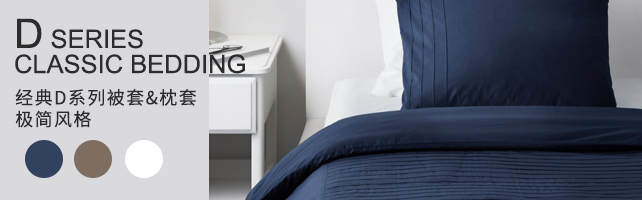
<style>
.page{position:relative;width:642px;height:200px;background:#dad9de}
.page>*{position:absolute;margin:0}
.t1{font:25.5px/25px "ArialMT";color:#2c2c2c;text-transform:uppercase}
.t2{font:40.8px/25px "ArialMT";color:#2c2c2c;text-transform:uppercase}
.t3{font:18px "SourceHanSansCN-Regular";letter-spacing:0.08em;color:#2c2c2c;text-transform:uppercase}
</style>
<div class="page">
<p class="t1" style="left:15px;top:18px;width:230px;height:56px"><span class="t2">D</span> Series <br>classic bedding</p>
<p class="t3" style="left:15px;top:89px;width:182px;height:39px">经典D系列被套&amp;枕套<br>极简风格</p>
</div>
